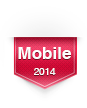
<style>
.page{position:relative;width:87px;height:108px;background:#ffffff}
.page>*{position:absolute;margin:0}
.t1{font:17px "HelveticaCE-Bold";color:#fefefe}
.t2{font:9.7px "HelveticaCE-Regular";color:#fefefe}
</style>
<div class="page">
<p class="t1" style="left:18px;top:47px;width:53px;height:28px;text-align:center">Mobile<br><br><span class="t2">2014</span></p>
</div>
